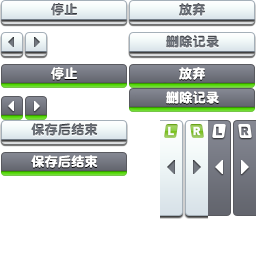
<style>
.page{position:relative;width:256px;height:256px;background:#ffffff}
.page>*{position:absolute;margin:0}
.t1{font:13.3px "DFPYuanW9";color:#6e737b}
.t2{font:13.3px "DFPYuanW9";color:#ffffff}
</style>
<div class="page">
<p class="t1" style="left:51px;top:3px;width:26px;height:13px">停止</p>
<p class="t1" style="left:179px;top:3px;width:26px;height:13px">放弃</p>
<p class="t1" style="left:166px;top:35px;width:53px;height:13px">删除记录</p>
<p class="t2" style="left:51px;top:67px;width:26px;height:13px">停止</p>
<p class="t2" style="left:179px;top:67px;width:26px;height:13px">放弃</p>
<p class="t2" style="left:166px;top:91px;width:53px;height:13px">删除记录</p>
<p class="t1" style="left:31px;top:123px;width:67px;height:13px">保存后结束</p>
<p class="t2" style="left:31px;top:155px;width:67px;height:13px">保存后结束</p>
</div>
